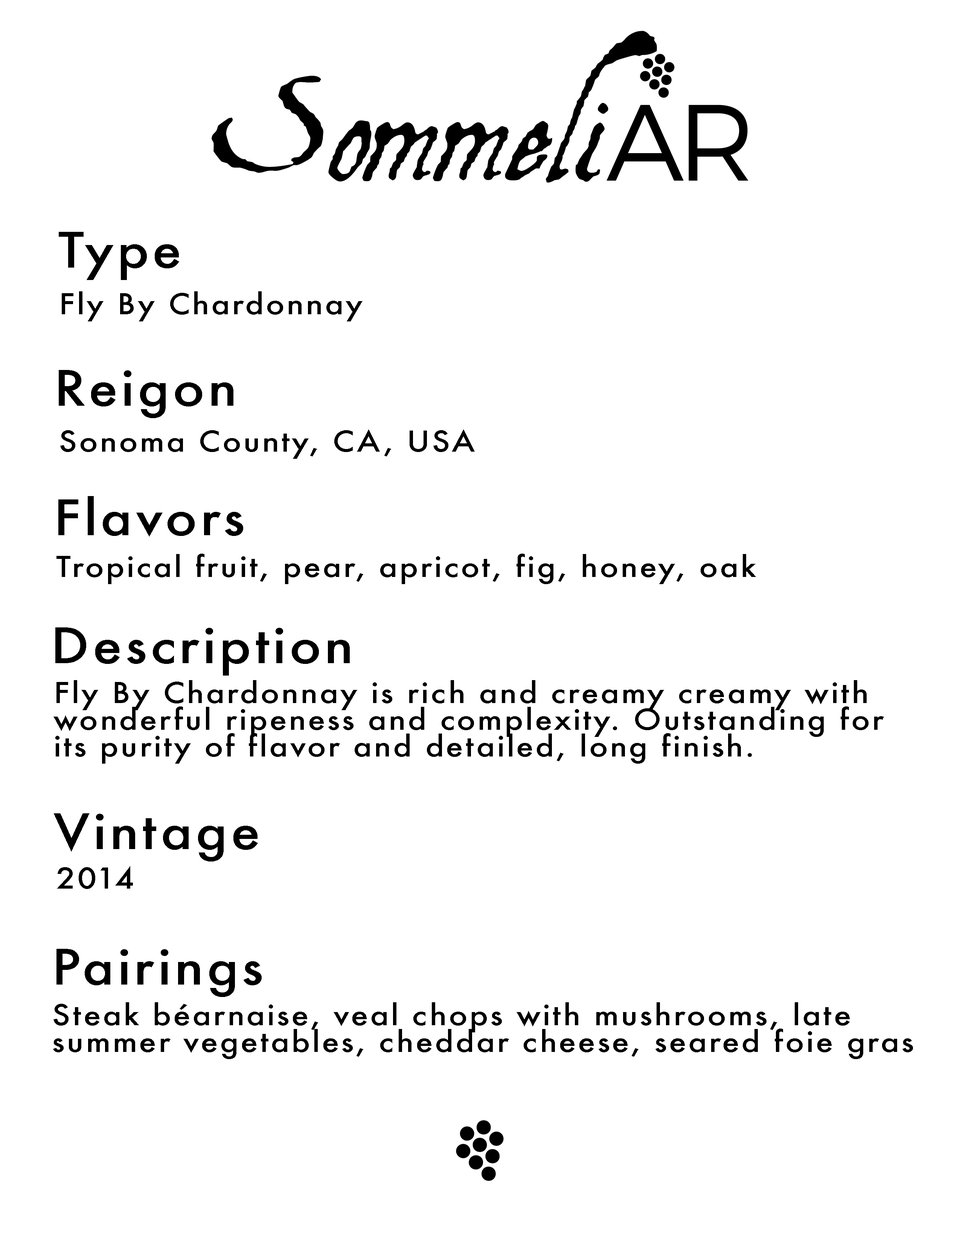
<style>
.page{position:relative;width:960px;height:1242px;background:#ffffff}
.page>*{position:absolute;margin:0}
.t1{font:47.5px "Futura-Medium";letter-spacing:0.06em;color:#000000;scale:1.12 1}
.t2{font:27.9px "Futura-Medium";letter-spacing:0.06em;color:#000000;scale:1.12 1}
.t3{font:27.9px/26.7px "Futura-Medium";letter-spacing:0.06em;color:#000000;scale:1.12 1}
</style>
<div class="page">
<p class="t1" style="left:59px;top:232px;width:120px;height:48px">Type</p>
<p class="t2" style="left:62px;top:291px;width:301px;height:30px">Fly By Chardonnay</p>
<p class="t1" style="left:59px;top:370px;width:174px;height:48px">Reigon</p>
<p class="t2" style="left:60px;top:430px;width:415px;height:29px">Sonoma County, CA, USA</p>
<p class="t1" style="left:58px;top:496px;width:185px;height:41px">Flavors</p>
<p class="t2" style="left:56px;top:554px;width:700px;height:30px">Tropical fruit, pear, apricot, fig, honey, oak</p>
<p class="t1" style="left:55px;top:628px;width:295px;height:48px">Description</p>
<p class="t3" style="left:53px;top:680px;width:831px;height:84px">Fly By Chardonnay is rich and creamy creamy with<br>wonderful ripeness and complexity. Outstanding for<br>its purity of flavor and detailed, long finish.</p>
<p class="t1" style="left:54px;top:813px;width:204px;height:49px">Vintage</p>
<p class="t2" style="left:57px;top:866px;width:76px;height:23px">2014</p>
<p class="t1" style="left:56px;top:949px;width:206px;height:48px">Pairings</p>
<p class="t3" style="left:53px;top:1002px;width:860px;height:57px">Steak béarnaise, veal chops with mushrooms, late<br>summer vegetables, cheddar cheese, seared foie gras</p>
</div>
